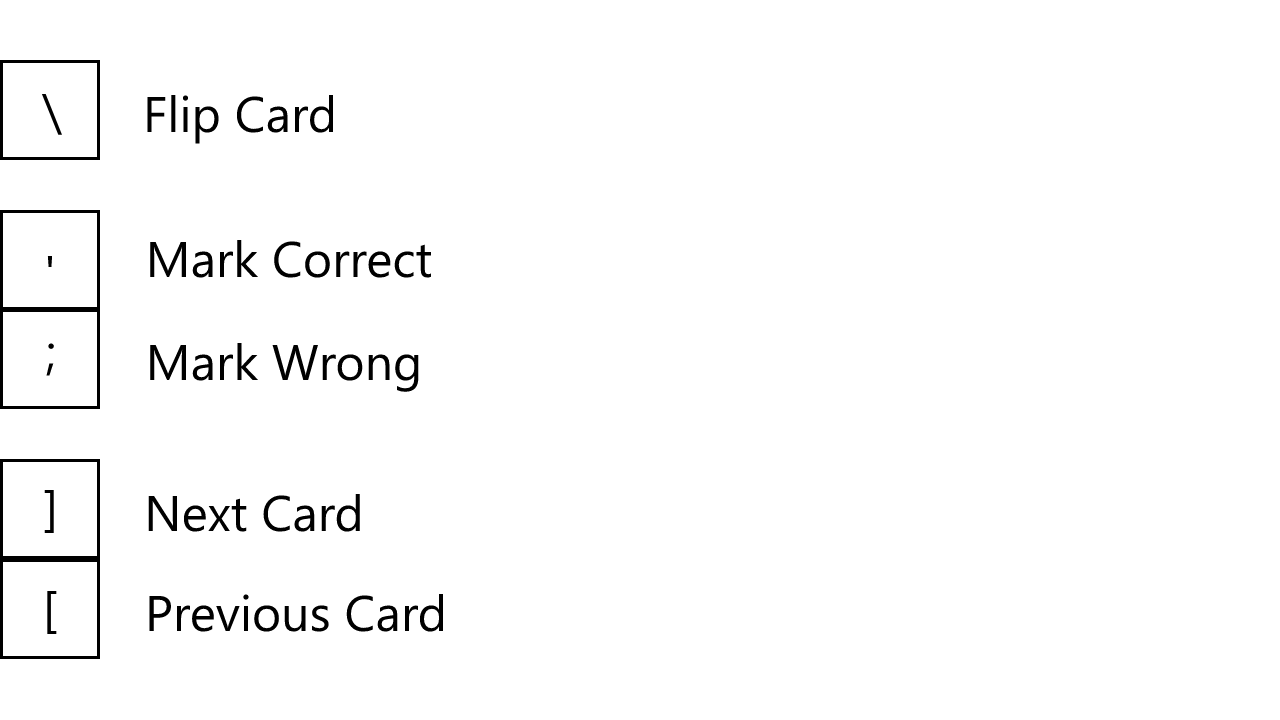
<style>
.page{position:relative;width:1280px;height:720px;background:#ffffff}
.page>*{position:absolute;margin:0}
.t1{font:50px "SegoeUI";color:#000000}
</style>
<div class="page">
<p class="t1" style="left:41px;top:93px;width:22px;height:42px">\</p>
<p class="t1" style="left:147px;top:94px;width:187px;height:50px">Flip Card</p>
<p class="t1" style="left:150px;top:239px;width:282px;height:39px">Mark Correct</p>
<p class="t1" style="left:47px;top:255px;width:6px;height:12px">'</p>
<p class="t1" style="left:150px;top:342px;width:269px;height:50px">Mark Wrong</p>
<p class="t1" style="left:46px;top:343px;width:8px;height:33px">;</p>
<p class="t1" style="left:44px;top:489px;width:10px;height:44px">]</p>
<p class="t1" style="left:148px;top:493px;width:212px;height:39px">Next Card</p>
<p class="t1" style="left:47px;top:590px;width:10px;height:44px">[</p>
<p class="t1" style="left:149px;top:593px;width:294px;height:39px">Previous Card</p>
</div>
